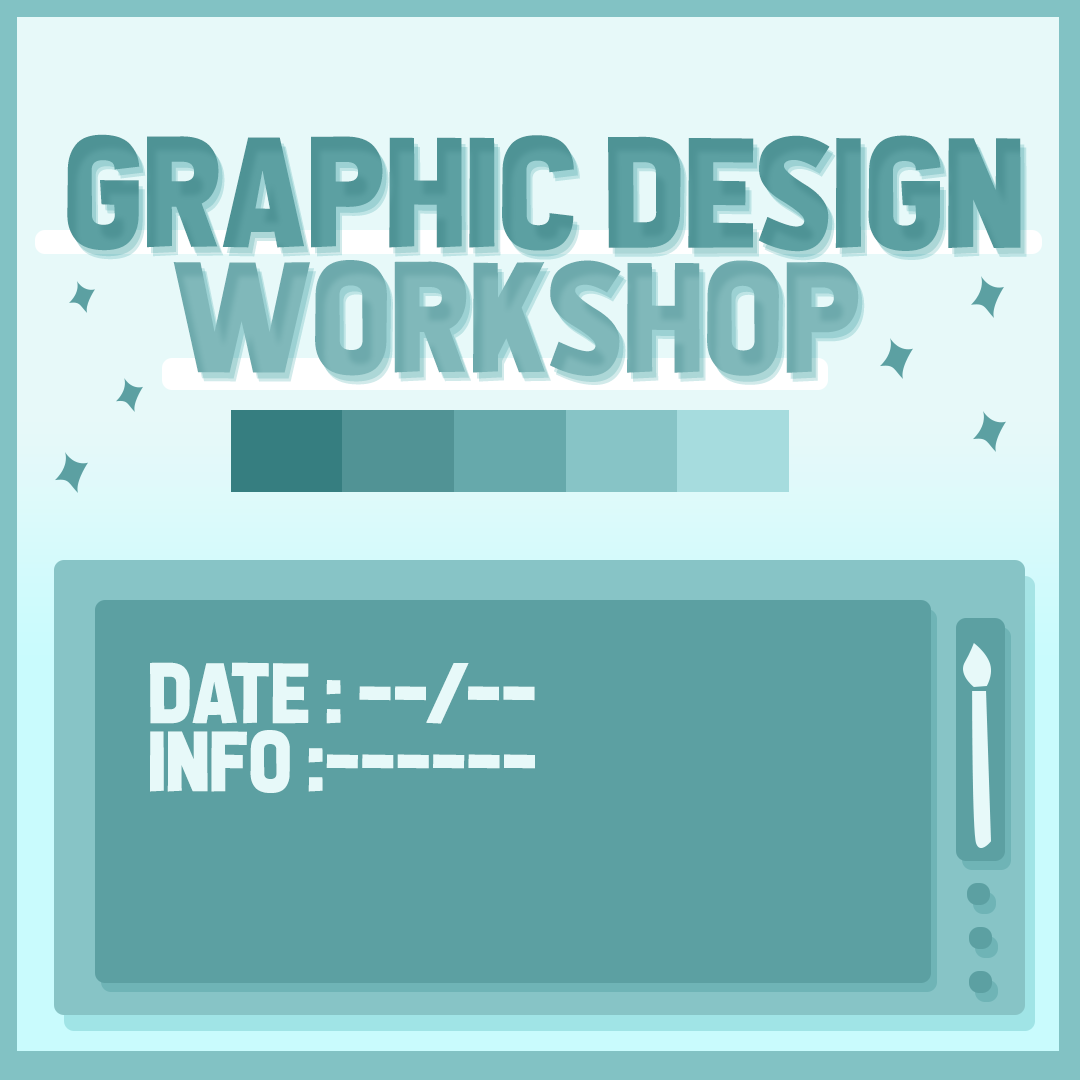
<style>
.page{position:relative;width:1080px;height:1080px;background:#5ca0a2}
.page>*{position:absolute;margin:0}
.t1{font:156.4px/125px "AlltheWaytotheSun";color:#5ca0a2}
.t2{font:156.4px/125px "AlltheWaytotheSun";color:#80b8ba}
.t3{font:85.2px/68.1px "AlltheWaytotheSun";color:#e7f9f9}
</style>
<div class="page">
<p class="t1" style="left:67px;top:134px;width:954px;height:242px;text-align:center">Graphic design<br><span class="t2">workshop</span></p>
<p class="t3" style="left:150px;top:662px;width:385px;height:131px;text-align:center">date : --/--<br>info :------</p>
</div>
